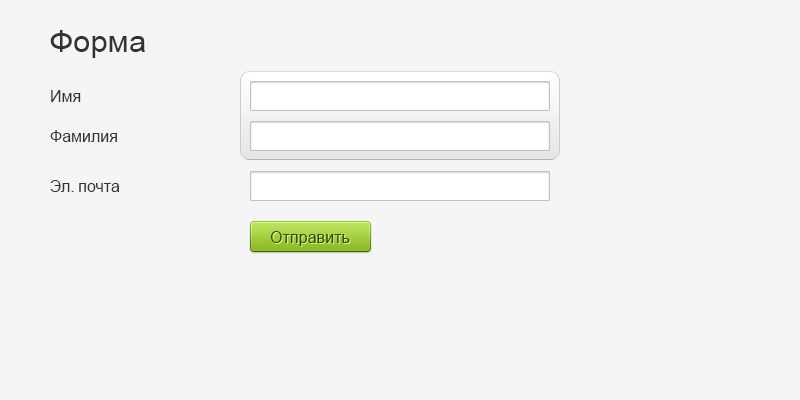
<style>
.page{position:relative;width:800px;height:400px;background:#f5f5f5}
.page>*{position:absolute;margin:0}
.t1{font:31px "ArialMT";color:#333333}
.t2{font:16px "ArialMT";color:#333333}
.t3{font:16px "ArialMT";color:#354412}
</style>
<div class="page">
<p class="t1" style="left:50px;top:30px;width:95px;height:28px">Форма</p>
<p class="t2" style="left:51px;top:90px;width:30px;height:12px">Имя</p>
<p class="t2" style="left:50px;top:130px;width:67px;height:12px">Фамилия</p>
<p class="t2" style="left:50px;top:180px;width:70px;height:12px">Эл. почта</p>
<p class="t3" style="left:270px;top:231px;width:80px;height:15px">Отправить</p>
</div>
